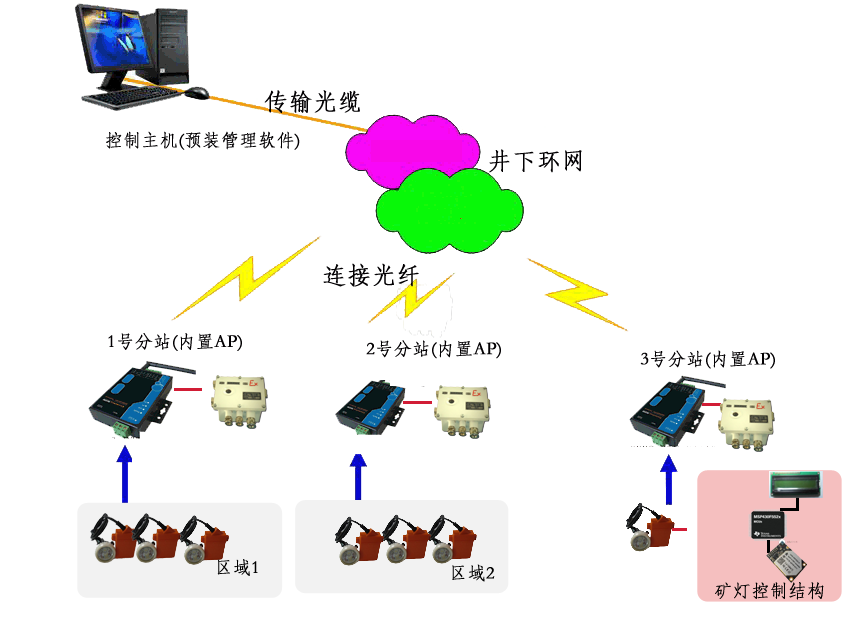
<style>
.page{position:relative;width:850px;height:623px;background:#ffffff}
.page>*{position:absolute;margin:0}
.t1{font:24px "STFangsong";color:#020002;font-weight:bold}
.t2{font:18px "STFangsong";color:#020002;font-weight:bold}
.t3{font:18px "STFangsong";color:#000000;font-weight:bold}
</style>
<div class="page">
<p class="t1" style="left:264px;top:90px;width:96px;height:23px">传输光缆</p>
<p class="t2" style="left:106px;top:131px;width:194px;height:19px">控制主机(预装管理软件)</p>
<p class="t1" style="left:489px;top:149px;width:93px;height:24px">井下环网</p>
<p class="t1" style="left:323px;top:263px;width:96px;height:24px">连接光纤</p>
<p class="t2" style="left:108px;top:333px;width:134px;height:18px">1号分站(内置AP)</p>
<p class="t2" style="left:366px;top:340px;width:135px;height:19px">2号分站(内置AP)</p>
<p class="t2" style="left:640px;top:350px;width:135px;height:19px">3号分站(内置AP)</p>
<p class="t3" style="left:217px;top:559px;width:41px;height:17px">区域1</p>
<p class="t3" style="left:452px;top:564px;width:43px;height:18px">区域2</p>
<p class="t3" style="left:715px;top:582px;width:109px;height:18px">矿灯控制结构</p>
</div>
